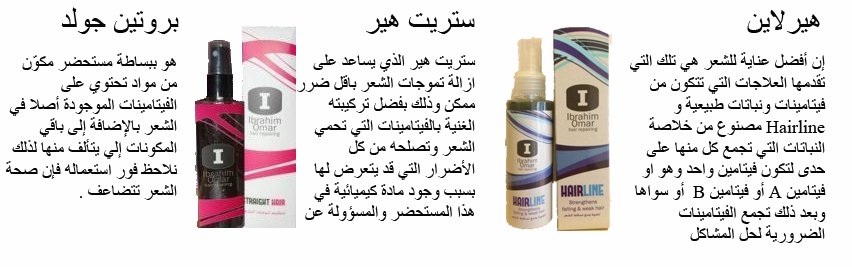
<style>
.page{position:relative;width:852px;height:267px;background:#fefefe}
.page>*{position:absolute;margin:0}
.t1{font:30px "TimesNewRomanPSMT";color:#060606}
.t2{font:18px "TimesNewRomanPSMT";color:#060606}
</style>
<div class="page">
<p class="t1" style="left:61px;top:7px;width:118px;height:27px">بروتين جولد</p>
<p class="t1" style="left:366px;top:11px;width:109px;height:23px">ستريت هير</p>
<p class="t1" style="left:747px;top:10px;width:73px;height:24px">هيرلاين</p>
<p class="t2" style="left:5px;top:53px;width:173px;height:147px">هو ببساطة مستحضر مكوّن من مواد تحتوي على الفيتامينات الموجودة أصلا في الشعر بالإضافة إلى باقي المكونات إلي يتألف منها لذلك نلاحظ فور استعماله فإن صحة الشعر تتضاعف .</p>
<p class="t2" style="left:297px;top:53px;width:179px;height:168px">ستريت هير الذي يساعد على ازالة تموجات الشعر باقل ضرر ممكن وذلك بفضل تركيبته الغنية بالفيتامينات التي تحمي الشعر وتصلحه من كل الأضرار التي قد يتعرض لها بسبب وجود مادة كيميائية في هذا المستحضر والمسؤولة عن تمليس الشعر</p>
<p class="t2" style="left:630px;top:52px;width:196px;height:191px">إن أفضل عناية للشعر هي تلك التي تقدمها العلاجات التي تتكون من فيتامينات ونباتات طبيعية وHairline مصنوع من خلاصة النباتات التي تجمع كل منها على حدى لتكون فيتامين واحد وهو او فيتامين A أو فيتامين B  أو سواها وبعد ذلك تجمع الفيتامينات الضرورية لحل المشاكل</p>
</div>
